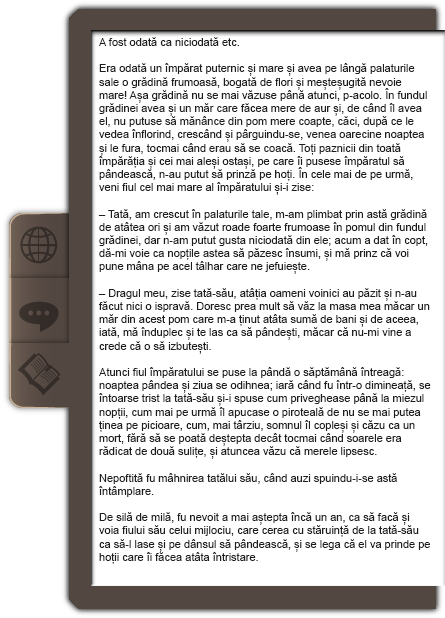
<style>
.page{position:relative;width:445px;height:618px;background:#ffffff}
.page>*{position:absolute;margin:0}
.t1{font:11px "ArialMT";color:#1f1d1d}
</style>
<div class="page">
<p class="t1" style="left:98px;top:37px;width:333px;height:527px">A fost odată ca niciodată etc.<br><br>Era odată un împărat puternic și mare și avea pe lângă palaturile sale o grădină frumoasă, bogată de flori și meșteșugită nevoie mare! Așa grădină nu se mai văzuse până atunci, p-acolo. În fundul grădinei avea și un măr care făcea mere de aur și, de când îl avea el, nu putuse să mănânce din pom mere coapte, căci, după ce le vedea înflorind, crescând și pârguindu-se, venea oarecine noaptea și le fura, tocmai când erau să se coacă. Toți paznicii din toată împărăția și cei mai aleși ostași, pe care îi pusese împăratul să pândească, n-au putut să prinză pe hoți. În cele mai de pe urmă, veni fiul cel mai mare al împăratului și-i zise:<br><br>– Tată, am crescut în palaturile tale, m-am plimbat prin astă grădină de atâtea ori și am văzut roade foarte frumoase în pomul din fundul grădinei, dar n-am putut gusta niciodată din ele; acum a dat în copt, dă-mi voie ca nopțile astea să păzesc însumi, și mă prinz că voi pune mâna pe acel tâlhar care ne jefuiește.<br><br>– Dragul meu, zise tată-său, atâția oameni voinici au păzit și n-au făcut nici o ispravă. Doresc prea mult să văz la masa mea măcar un măr din acest pom care m-a ținut atâta sumă de bani și de aceea, iată, mă înduplec și te las ca să pândești, măcar că nu-mi vine a crede că o să izbutești.<br><br>Atunci fiul împăratului se puse la pândă o săptămână întreagă: noaptea pândea și ziua se odihnea; iară când fu într-o dimineață, se întoarse trist la tată-său și-i spuse cum priveghease până la miezul nopții, cum mai pe urmă îl apucase o piroteală de nu se mai putea ținea pe picioare, cum, mai târziu, somnul îl copleși și căzu ca un mort, fără să se poată deștepta decât tocmai când soarele era rădicat de două sulițe, și atuncea văzu că merele lipsesc.<br><br>Nepoftită fu mâhnirea tatălui său, când auzi spuindu-i-se astă întâmplare.<br><br>De silă de milă, fu nevoit a mai aștepta încă un an, ca să facă și voia fiului său celui mijlociu, care cerea cu stăruință de la tată-său ca să-l lase și pe dânsul să pândească, și se lega că el va prinde pe hoții care îi făcea atâta întristare.<br><br>Timpul veni, merele începură a se pârgui; atunci fiul său cel mijlociu păzi și el; dară păți ca și frate-său cel mare.</p>
</div>
